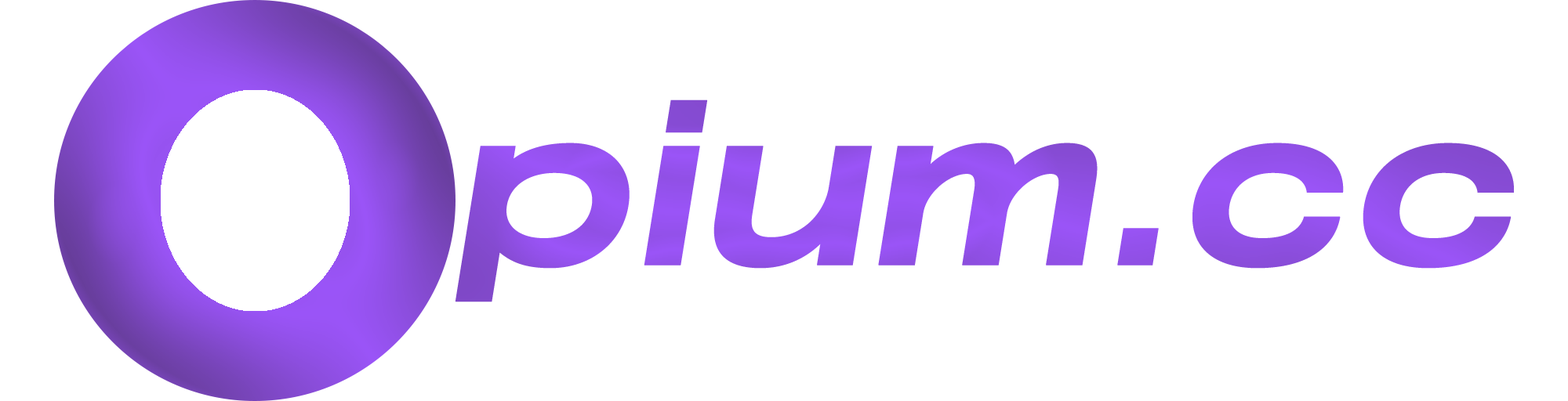
<style>
.page{position:relative;width:1568px;height:401px;background:#ffffff}
.page>*{position:absolute;margin:0}
.t1{font:235.2px "FONTSPRINGDEMO-GrillmasterExpandedExtBdRegular";color:#894dd9;font-weight:bold;font-style:italic;scale:0.91 1}
</style>
<div class="page">
<p class="t1" style="left:455px;top:100px;width:1059px;height:203px">pium.cc</p>
</div>
